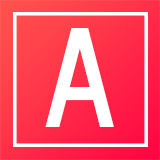
<style>
.page{position:relative;width:160px;height:160px}
.page>*{position:absolute;margin:0}
.t1{font:134.7px "QuickTypeCondensed-Bold";letter-spacing:0.117em;color:#ffffff;scale:0.94 1}
</style>
<div class="page">
<p class="t1" style="left:45px;top:28px;width:69px;height:99px">A</p>
</div>
